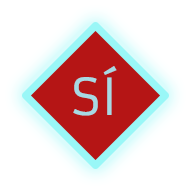
<style>
.page{position:relative;width:192px;height:192px;background:#ffffff}
.page>*{position:absolute;margin:0}
.t1{font:50px "Armata-Regular";letter-spacing:0.01em;color:#a7d9e3}
</style>
<div class="page">
<p class="t1" style="left:73px;top:66px;width:44px;height:50px">SÍ</p>
</div>
